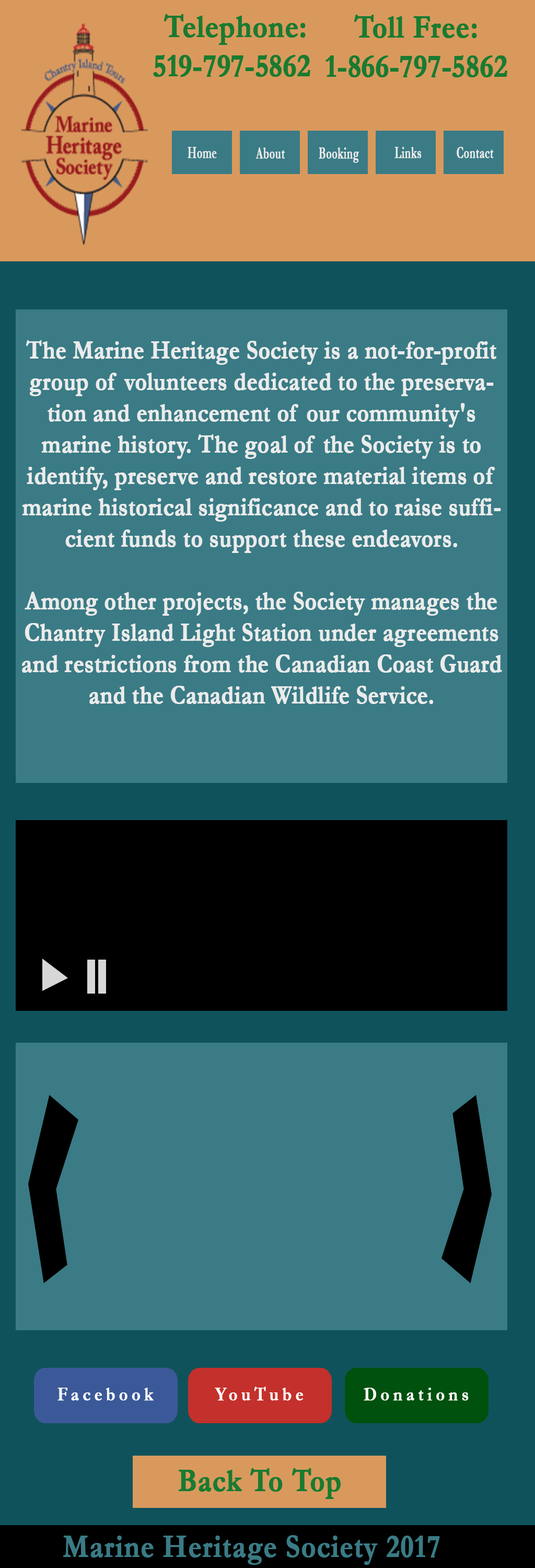
<style>
.page{position:relative;width:535px;height:1568px;background:#3a7b85}
.page>*{position:absolute;margin:0}
.t1{font:32.7px "Garamond-Bold";letter-spacing:-0.01em;color:#197b30;font-weight:bold;scale:0.86 1}
.t2{font:32.7px "Garamond-Bold";color:#197b30;font-weight:bold;scale:0.86 1}
.t3{font:17.5px "Garamond-Bold";color:#ebebeb;font-weight:bold;scale:0.59 1}
.t4{font:26.1px "Garamond-Bold";color:#ebebeb;font-weight:bold;scale:0.86 1}
.t5{font:19.2px "Garamond-Bold";letter-spacing:0.2em;color:#fefefe;font-weight:bold;scale:0.86 1}
.t6{font:19.2px "Garamond-Bold";letter-spacing:0.2em;color:#ffffff;font-weight:bold;scale:0.86 1}
.t7{font:32.7px "Garamond-Bold";color:#3a7b85;font-weight:bold;scale:0.86 1}
</style>
<div class="page">
<p class="t1" style="left:153px;top:14px;width:157px;height:63px;text-align:center"><span class="t2">Telephone:<br></span>519-797-5862</p>
<p class="t1" style="left:326px;top:15px;width:182px;height:62px;text-align:center"><span class="t2">Toll Free:<br></span>1-866-797-5862</p>
<p class="t3" style="left:188px;top:147px;width:29px;height:11px">Home</p>
<p class="t3" style="left:256px;top:147px;width:29px;height:12px">About</p>
<p class="t3" style="left:319px;top:147px;width:40px;height:16px">Booking</p>
<p class="t3" style="left:395px;top:147px;width:27px;height:11px">Links</p>
<p class="t3" style="left:457px;top:147px;width:37px;height:11px">Contact</p>
<p class="t4" style="left:22px;top:340px;width:480px;height:364px;text-align:center">The Marine Heritage Society is a not-for-profit group of volunteers dedicated to the preservation and enhancement of our community's marine history. The goal of the Society is to identify, preserve and restore material items of marine historical significance and to raise sufficient funds to support these endeavors.<br><br>Among other projects, the Society manages the Chantry Island Light Station under agreements and restrictions from the Canadian Coast Guard and the Canadian Wildlife Service.</p>
<p class="t5" style="left:57px;top:1388px;width:97px;height:13px">Facebook</p>
<p class="t6" style="left:215px;top:1387px;width:89px;height:14px">YouTube</p>
<p class="t6" style="left:364px;top:1388px;width:105px;height:13px">Donations</p>
<p class="t2" style="left:178px;top:1468px;width:163px;height:31px">Back To Top</p>
<p class="t7" style="left:63px;top:1535px;width:377px;height:30px">Marine Heritage Society 2017</p>
</div>
